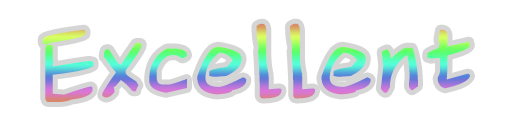
<style>
.page{position:relative;width:512px;height:128px;background:#ffffff}
.page>*{position:absolute;margin:0}
.t1{font:120px "SentyMARUKO"}
</style>
<div class="page">
<p class="t1" style="left:42px;top:23px;width:428px;height:79px">Excellent</p>
</div>
